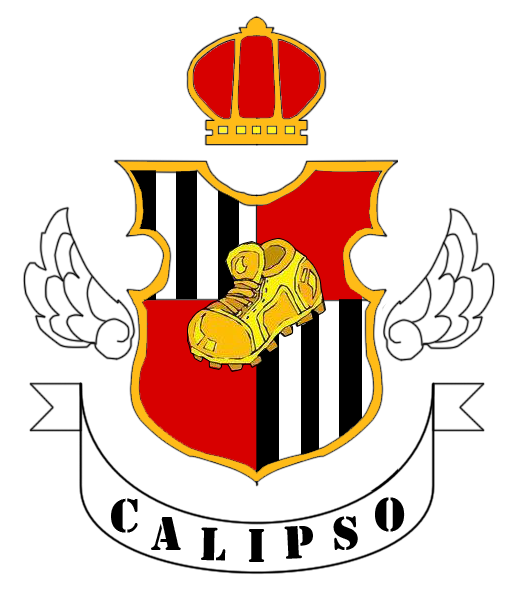
<style>
.page{position:relative;width:514px;height:600px;background:#ffffff}
.page>*{position:absolute;margin:0}
.t1{font:48.6px "Stencil";color:#000000}
</style>
<div class="page">
<p class="t1" style="left:375px;top:497px;width:30px;height:35px">O</p>
<p class="t1" style="left:111px;top:498px;width:27px;height:35px">C</p>
<p class="t1" style="left:151px;top:517px;width:30px;height:33px">A</p>
<p class="t1" style="left:333px;top:516px;width:25px;height:34px;rotate:-3deg">S</p>
<p class="t1" style="left:201px;top:527px;width:25px;height:34px;rotate:1deg">L</p>
<p class="t1" style="left:248px;top:529px;width:17px;height:33px">I</p>
<p class="t1" style="left:284px;top:526px;width:29px;height:33px;rotate:-3deg">P</p>
</div>
